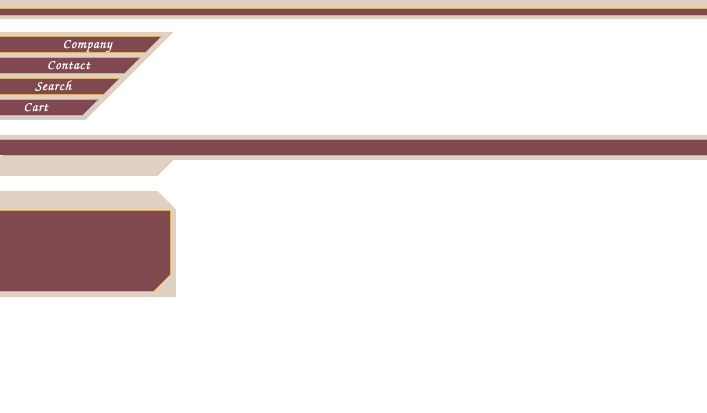
<style>
.page{position:relative;width:707px;height:413px;background:#ffffff}
.page>*{position:absolute;margin:0}
.t1{font:13px/21px "ZapfChanceryITCbyBT-MediumItal";letter-spacing:0.075em;color:#ffffff}
</style>
<div class="page">
<p class="t1" style="left:24px;top:40px;width:89px;height:72px">Company<br>                      Contact<br>                   Search<br>                Cart</p>
</div>
